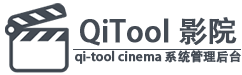
<style>
.page{position:relative;width:242px;height:75px;background:#ffffff}
.page>*{position:absolute;margin:0}
.t1{font:29.2px "AdobeHeitiStd-Regular";color:#444b54;font-weight:bold}
.t2{font:12.5px "AdobeHeitiStd-Regular";color:#444b54;font-weight:bold}
</style>
<div class="page">
<p class="t1" style="left:80px;top:17px;width:157px;height:29px">QiTool 影院</p>
<p class="t2" style="left:75px;top:50px;width:166px;height:14px">qi-tool cinema 系统管理后台</p>
</div>
